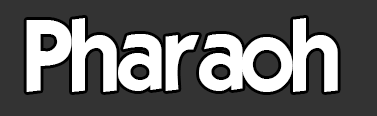
<style>
.page{position:relative;width:377px;height:116px;background:#333333}
.page>*{position:absolute;margin:0}
.t1{font:100px "ELEGANCE";color:#ffffff}
</style>
<div class="page">
<p class="t1" style="left:26px;top:18px;width:312px;height:74px">Pharaoh</p>
</div>
